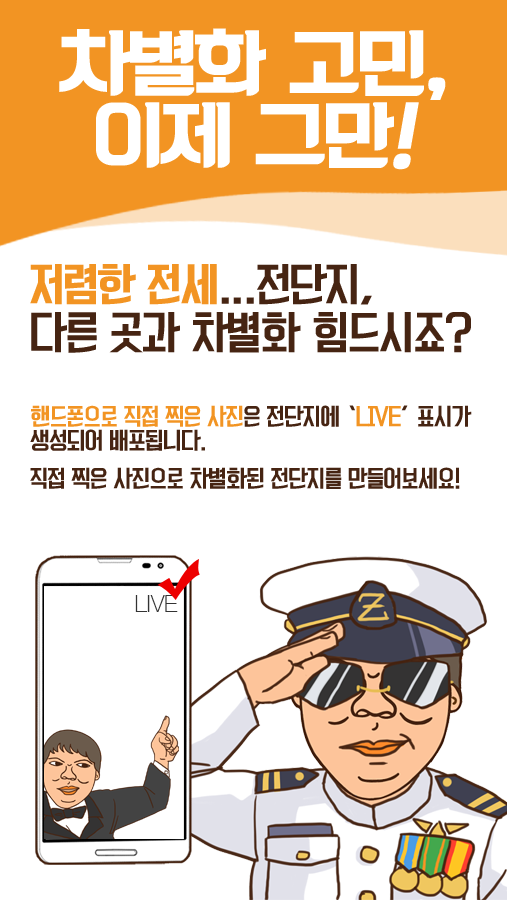
<style>
.page{position:relative;width:507px;height:900px;background:#ffffff}
.page>*{position:absolute;margin:0}
.t1{font:72px/72px "KoreanBLACK-B";letter-spacing:-0.05em;color:#ffffff}
.t2{font:72px/72px "KoreanBLACK-B";letter-spacing:-0.05em;color:#ffffff;font-style:italic}
.t3{font:42px/48px "KoreanYNMYT-M";letter-spacing:-0.05em;color:#462412}
.t4{font:42px/48px "KoreanYNMYT-B";letter-spacing:-0.05em;color:#f29423}
.t5{font:22px/24px "KoreanYNMYT-M";letter-spacing:-0.05em;color:#462412}
.t6{font:22px/24px "KoreanYNMYT-M";letter-spacing:-0.05em;color:#f29423}
.t7{font:22px/14px "KoreanYNMYT-M";letter-spacing:-0.05em;color:#462412}
.t8{font:24px "HelveNueThin";color:#333333}
</style>
<div class="page">
<p class="t1" style="left:59px;top:28px;width:387px;height:142px;text-align:center">차별화 고민,<br>이제 그만<span class="t2">!</span></p>
<p class="t3" style="left:30px;top:264px;width:441px;height:89px"><span class="t4">저렴한 전세</span>...전단지,<br>다른 곳과 차별화 힘드시죠?</p>
<p class="t5" style="left:30px;top:405px;width:442px;height:84px"><span class="t6">핸드폰으로 직접 찍은 사진</span>은 전단지에 ‘<span class="t6">LIVE</span>’ 표시가<br>생성되<span class="t7">어 배포됩니다.<br><br>직접 찍은 사</span>진으로 차별화된 전단지를 만들어보세요!</p>
<p class="t8" style="left:135px;top:595px;width:43px;height:17px">LIVE</p>
</div>
